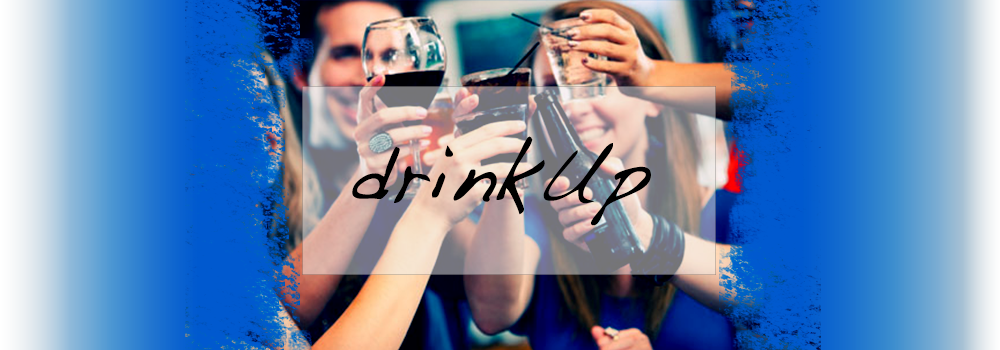
<style>
.page{position:relative;width:1000px;height:350px}
.page>*{position:absolute;margin:0}
.t1{font:83.3px "Handwriting-Dakota";color:#000000}
</style>
<div class="page">
<p class="t1" style="left:352px;top:136px;width:299px;height:90px">drinkUp</p>
</div>
